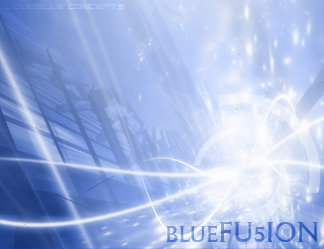
<style>
.page{position:relative;width:324px;height:249px}
.page>*{position:absolute;margin:0}
.t1{font:9px "DominatorThinItalic";text-transform:uppercase}
.t2{font:30px "ColumnaSolSCD";text-transform:uppercase}
.t3{font:24px "ColumnaSolSCD";text-transform:uppercase}
</style>
<div class="page">
<p class="t1" style="left:4px;top:4px;width:121px;height:7px">Liquidblue concepts</p>
<p class="t2" style="left:166px;top:221px;width:153px;height:22px"><span class="t3">Blue</span>Fu5ion</p>
</div>
